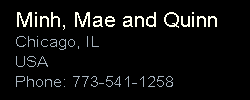
<style>
.page{position:relative;width:250px;height:100px;background:#000000}
.page>*{position:absolute;margin:0}
.t1{font:15px/20px "ArialMT";color:#a7b3be;scale:1.1 1}
.t2{font:20px/20px "ArialMT";color:#fffff0;scale:1.1 1}
</style>
<div class="page">
<p class="t1" style="left:16px;top:12px;width:201px;height:75px"><span class="t2">Minh, Mae and Quinn<br></span>Chicago, IL <br>USA<br>Phone: 773-541-1258</p>
</div>
